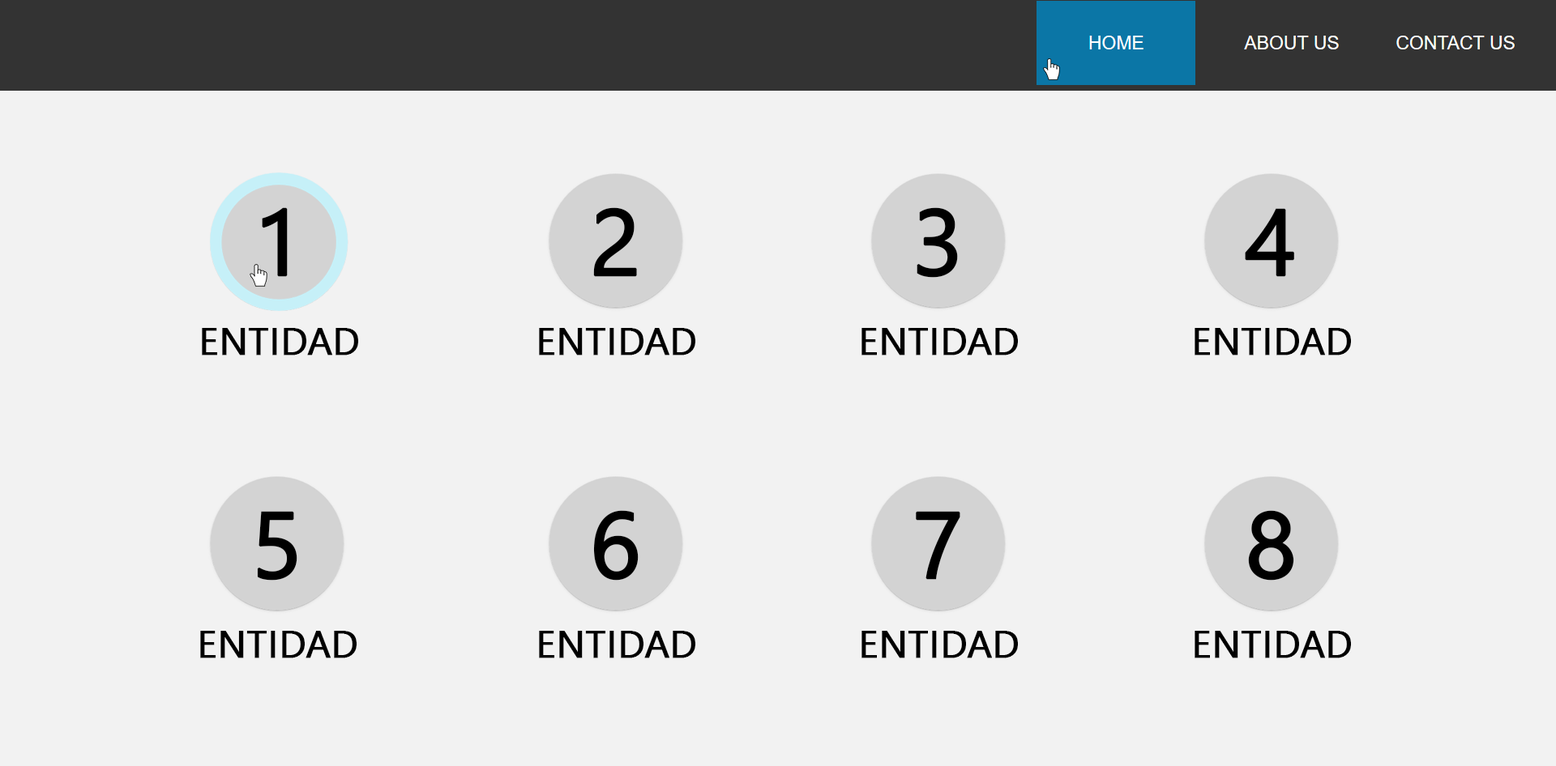
<style>
.page{position:relative;width:1556px;height:766px;background:#f2f2f2}
.page>*{position:absolute;margin:0}
.t1{font:94.3px "SegoeUI";color:#000000;font-weight:bold}
.t2{font:37.9px "SegoeUI";color:#000000;font-weight:bold}
</style>
<div class="page">
<p class="t1" style="left:262px;top:207px;width:26px;height:70px">1</p>
<p class="t1" style="left:593px;top:207px;width:44px;height:70px">2</p>
<p class="t1" style="left:916px;top:207px;width:42px;height:71px">3</p>
<p class="t1" style="left:1245px;top:208px;width:49px;height:69px">4</p>
<p class="t2" style="left:202px;top:328px;width:156px;height:28px">ENTIDAD</p>
<p class="t2" style="left:539px;top:328px;width:156px;height:28px">ENTIDAD</p>
<p class="t2" style="left:861px;top:328px;width:157px;height:28px">ENTIDAD</p>
<p class="t2" style="left:1194px;top:328px;width:157px;height:28px">ENTIDAD</p>
<p class="t1" style="left:257px;top:511px;width:40px;height:70px">5</p>
<p class="t1" style="left:593px;top:510px;width:45px;height:71px">6</p>
<p class="t1" style="left:916px;top:511px;width:44px;height:69px">7</p>
<p class="t1" style="left:1248px;top:510px;width:46px;height:71px">8</p>
<p class="t2" style="left:200px;top:631px;width:157px;height:28px">ENTIDAD</p>
<p class="t2" style="left:539px;top:631px;width:156px;height:28px">ENTIDAD</p>
<p class="t2" style="left:861px;top:631px;width:157px;height:28px">ENTIDAD</p>
<p class="t2" style="left:1194px;top:631px;width:157px;height:28px">ENTIDAD</p>
</div>
